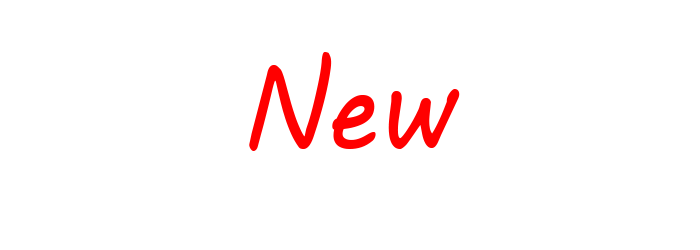
<style>
.page{position:relative;width:700px;height:250px;background:#ffffff}
.page>*{position:absolute;margin:0}
.t1{font:125px "MVBoli";color:#ff0000;scale:0.84 1}
</style>
<div class="page">
<p class="t1" style="left:249px;top:52px;width:211px;height:99px">New</p>
</div>
